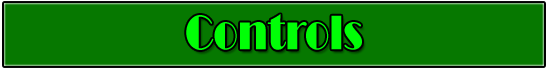
<style>
.page{position:relative;width:547px;height:69px;background:#067800}
.page>*{position:absolute;margin:0}
.t1{font:50.3px "Broadway";color:#00ff06;scale:0.8 1}
</style>
<div class="page">
<p class="t1" style="left:186px;top:14px;width:176px;height:36px">Controls</p>
</div>
